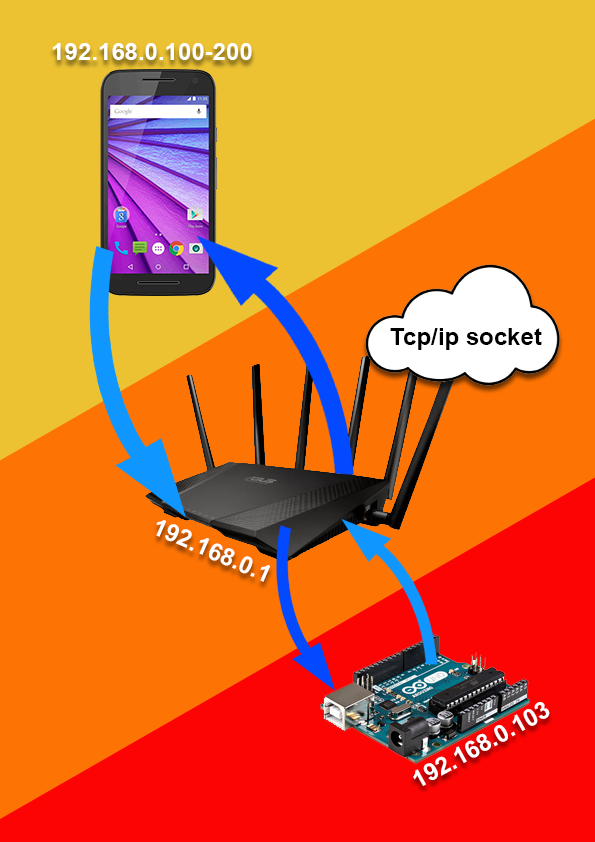
<style>
.page{position:relative;width:595px;height:842px;background:#fd7304}
.page>*{position:absolute;margin:0}
.t1{font:24px "Arial-BoldMT";color:#ffffff}
.t2{font:24px "Arial-BoldMT";color:#000000}
</style>
<div class="page">
<p class="t1" style="left:52px;top:43px;width:200px;height:17px">192.168.0.100-200</p>
<p class="t2" style="left:390px;top:328px;width:152px;height:22px">Tcp/ip socket</p>
<p class="t1" style="left:156px;top:520px;width:115px;height:62px;rotate:23deg">192.168.0.1</p>
<p class="t1" style="left:413px;top:702px;width:137px;height:84px;rotate:-29deg">192.168.0.103</p>
</div>
